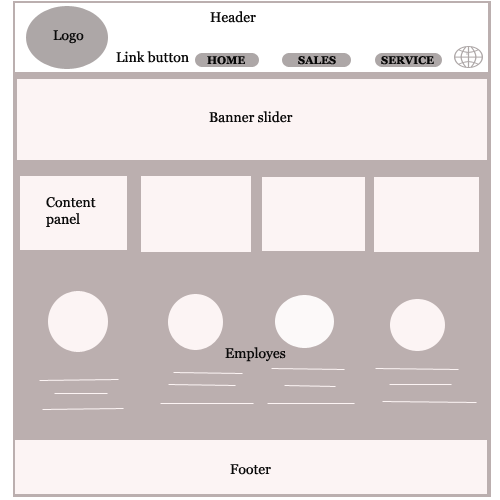
<style>
.page{position:relative;width:500px;height:500px;background:#bbafaf}
.page>*{position:absolute;margin:0}
.t1{font:14px "Georgia";color:#0a0a0a}
.t2{font:11px "Georgia-Bold";color:#070707}
.t3{font:11px "Georgia-Bold";color:#060606}
</style>
<div class="page">
<p class="t1" style="left:210px;top:11px;width:46px;height:12px">Header</p>
<p class="t1" style="left:53px;top:30px;width:31px;height:14px">Logo</p>
<p class="t1" style="left:116px;top:51px;width:73px;height:12px">Link button</p>
<p class="t2" style="left:207px;top:56px;width:38px;height:9px">HOME</p>
<p class="t3" style="left:298px;top:56px;width:38px;height:9px">SALES</p>
<p class="t2" style="left:381px;top:56px;width:53px;height:9px">SERVICE</p>
<p class="t1" style="left:209px;top:111px;width:84px;height:12px">Banner slider</p>
<p class="t1" style="left:46px;top:197px;width:50px;height:30px">Content<br>panel</p>
<p class="t1" style="left:225px;top:347px;width:61px;height:15px">Employes</p>
<p class="t1" style="left:230px;top:464px;width:41px;height:11px">Footer</p>
</div>
